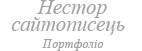
<style>
.page{position:relative;width:142px;height:51px;background:#ffffff}
.page>*{position:absolute;margin:0}
.t1{font:20.8px/16.7px "TimesNewRomanPS-ItalicMT";color:#a1a1a1}
.t2{font:20.8px/25px "MyriadPro-Regular";color:#a1a1a1}
.t3{font:20.8px/25px "TimesNewRomanPS-ItalicMT";color:#a1a1a1}
.t4{font:12.5px/16.7px "TimesNewRomanPS-ItalicMT";letter-spacing:0.005em;color:#a1a1a1}
</style>
<div class="page">
<p class="t1" style="left:11px;top:0px;width:114px;height:51px"><span class="t2">      </span><span class="t3">Нестор<br></span>сайтописець<br>      <span class="t4">Портфоліо</span></p>
</div>
